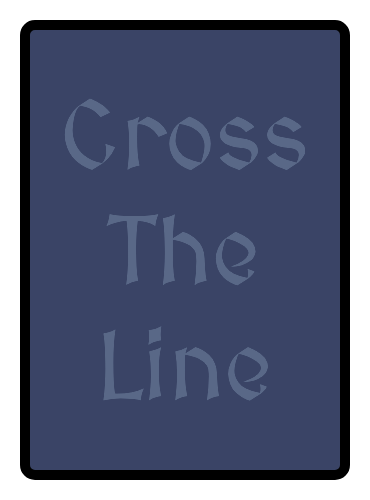
<style>
.page{position:relative;width:370px;height:500px;background:#3a4466}
.page>*{position:absolute;margin:0}
.t1{font:96px "MedievalSharp";color:#596887}
</style>
<div class="page">
<p class="t1" style="left:64px;top:98px;width:242px;height:303px;text-align:center">Cross The Line</p>
</div>
